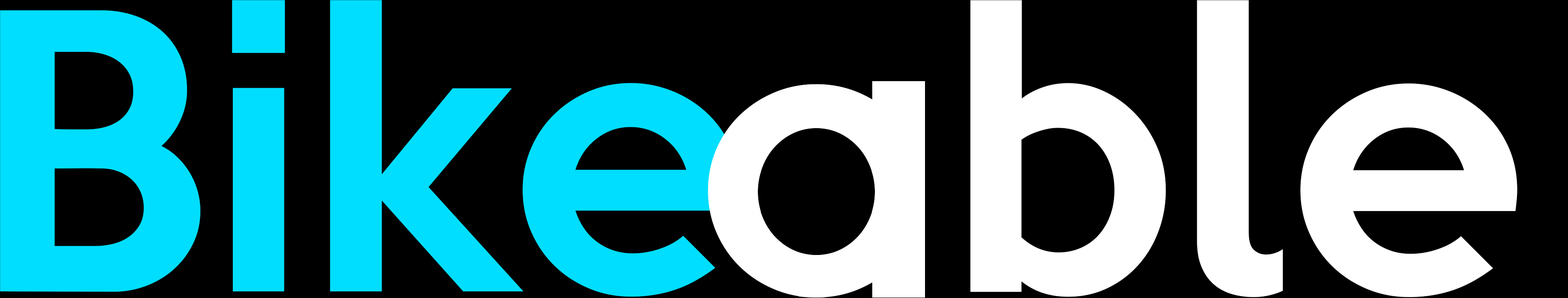
<style>
.page{position:relative;width:1568px;height:298px;background:#000000}
.page>*{position:absolute;margin:0}
.t1{font:351px "KeepCalm-Medium";color:#00deff}
.t2{font:351px "KeepCalm-Medium";color:#ffffff}
</style>
<div class="page">
<p class="t1" style="left:0px;top:0px;width:740px;height:297px">Bike</p>
<p class="t1" style="left:0px;top:0px;width:740px;height:297px">Bike</p>
<p class="t2" style="left:970px;top:0px;width:547px;height:297px">ble</p>
</div>
